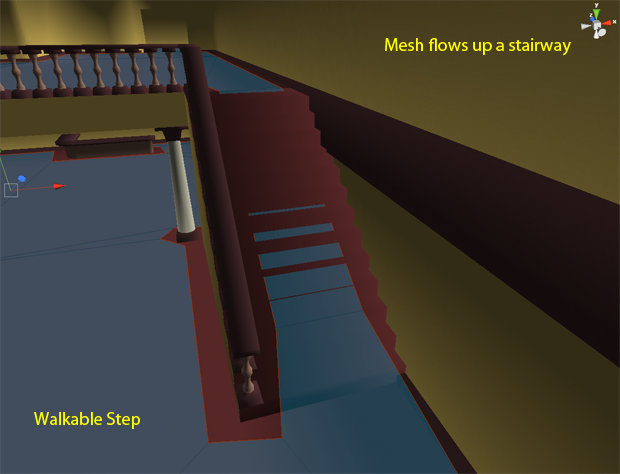
<style>
.page{position:relative;width:620px;height:474px}
.page>*{position:absolute;margin:0}
.t1{font:18px "MyriadPro-Regular";color:#ffff00}
</style>
<div class="page">
<p class="t1" style="left:385px;top:38px;width:186px;height:18px">Mesh flows up a stairway</p>
<p class="t1" style="left:34px;top:412px;width:106px;height:17px">Walkable Step</p>
</div>
